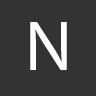
<style>
.page{position:relative;width:96px;height:96px;background:#333333}
.page>*{position:absolute;margin:0}
.t1{font:71.8px "MyriadPro-Regular";color:#ffffff}
</style>
<div class="page">
<p class="t1" style="left:30px;top:22px;width:37px;height:48px">N</p>
</div>
